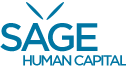
<style>
.page{position:relative;width:126px;height:66px;background:#ffffff}
.page>*{position:absolute;margin:0}
.t1{font:38px "GothamSSm-Medium";letter-spacing:-0.1em;color:#0076a3}
.t2{font:14px "GothamSSm-Medium";letter-spacing:-0.135em;color:#0076a3}
</style>
<div class="page">
<p class="t1" style="left:0px;top:23px;width:98px;height:29px">SAGE</p>
<p class="t2" style="left:23px;top:55px;width:105px;height:11px">HUMAN CAPITAL</p>
</div>
